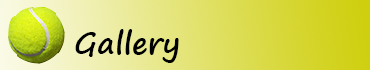
<style>
.page{position:relative;width:370px;height:70px}
.page>*{position:absolute;margin:0}
.t1{font:30px "SegoePrint-Bold";color:#000000}
</style>
<div class="page">
<p class="t1" style="left:75px;top:29px;width:104px;height:34px">Gallery</p>
</div>
